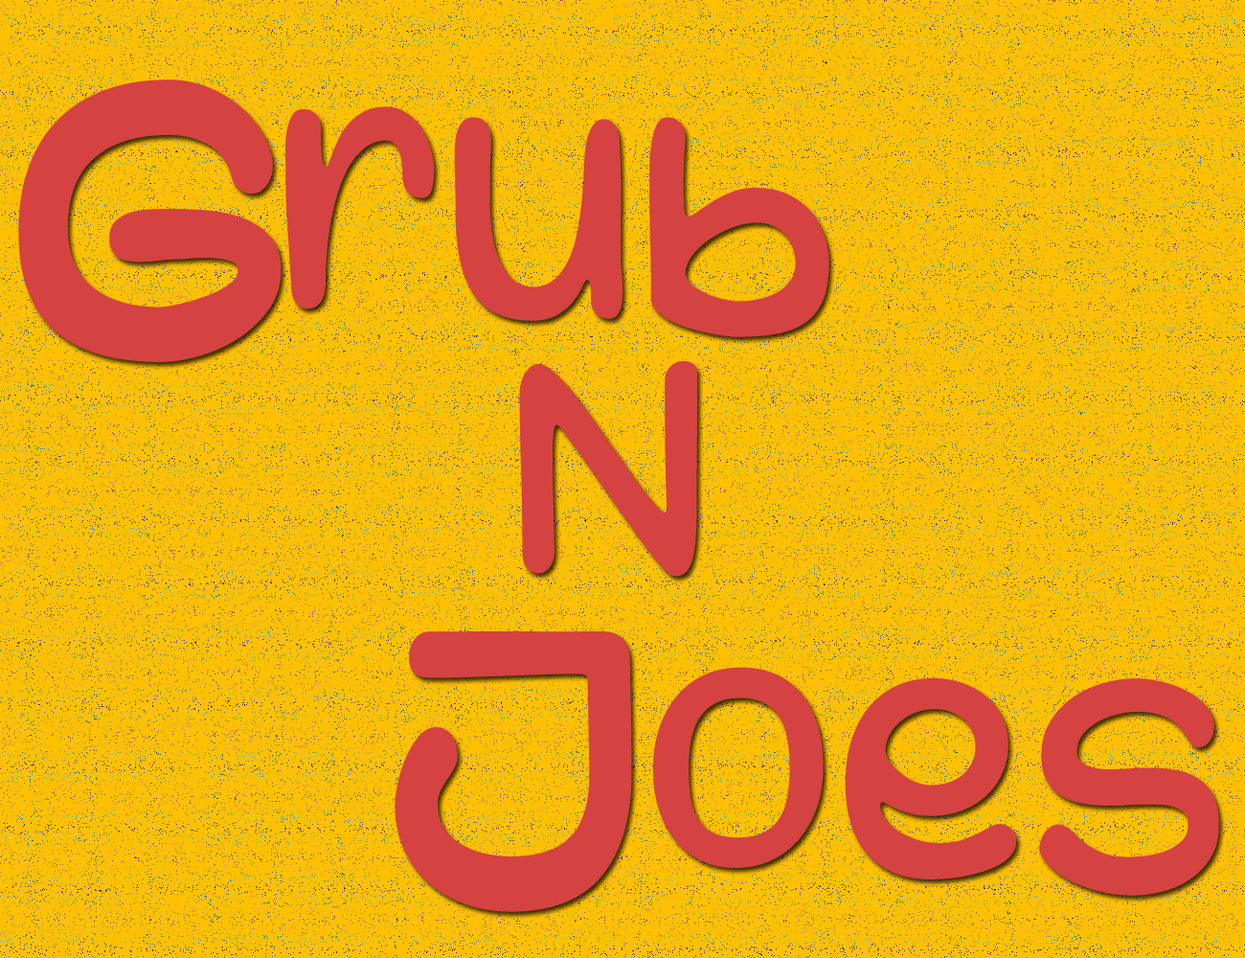
<style>
.page{position:relative;width:1245px;height:958px;background:#ffc000}
.page>*{position:absolute;margin:0}
.t1{font:383.1px "RustyHooks-Regular";color:#d44242}
.t2{font:287.3px "RustyHooks-Regular";color:#d44242}
</style>
<div class="page">
<p class="t1" style="left:18px;top:79px;width:264px;height:283px">G</p>
<p class="t2" style="left:285px;top:106px;width:150px;height:203px">r</p>
<p class="t2" style="left:454px;top:117px;width:169px;height:204px">u</p>
<p class="t2" style="left:649px;top:117px;width:180px;height:220px">b</p>
<p class="t2" style="left:519px;top:361px;width:178px;height:216px">N</p>
<p class="t1" style="left:395px;top:631px;width:237px;height:281px">J</p>
<p class="t2" style="left:652px;top:667px;width:172px;height:201px">o</p>
<p class="t2" style="left:845px;top:678px;width:172px;height:201px">e</p>
<p class="t2" style="left:1039px;top:678px;width:180px;height:217px">s</p>
</div>
